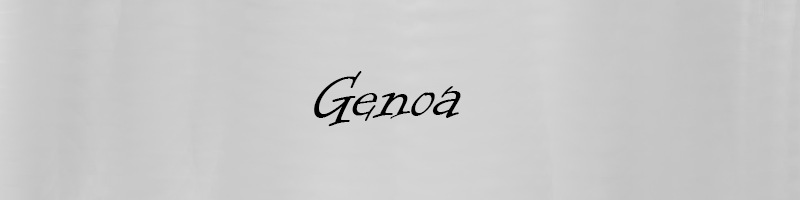
<style>
.page{position:relative;width:800px;height:200px}
.page>*{position:absolute;margin:0}
.t1{font:72px "InformalRoman-Regular";color:#000000}
</style>
<div class="page">
<p class="t1" style="left:314px;top:71px;width:147px;height:56px">Genoa</p>
</div>
